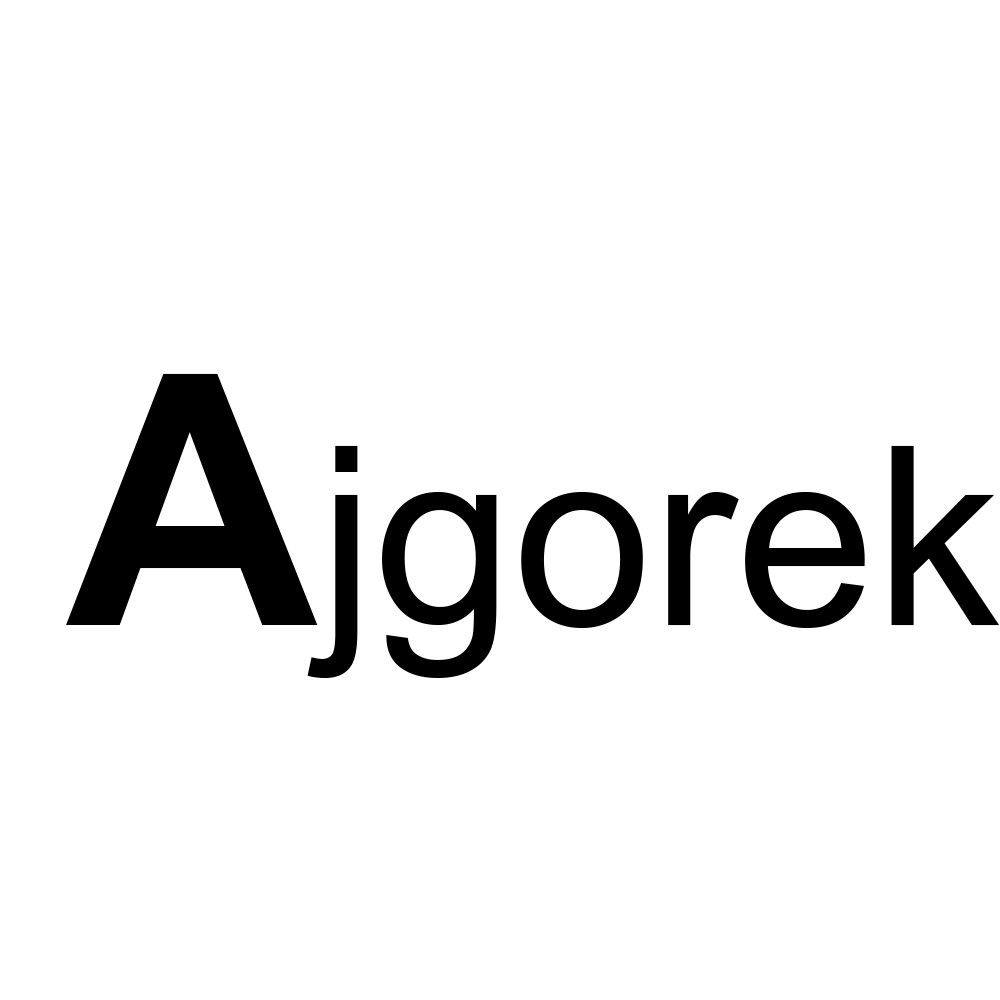
<style>
.page{position:relative;width:1000px;height:1000px;background:#ffffff}
.page>*{position:absolute;margin:0}
.t1{font:250px "ArialMT";color:#000000}
.t2{font:350px "Arial-BoldMT";color:#000000}
</style>
<div class="page">
<p class="t1" style="left:66px;top:373px;width:933px;height:305px"><span class="t2">A</span>jgorek</p>
</div>
